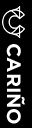
<style>
.page{position:relative;width:32px;height:128px;background:#000000}
.page>*{position:absolute;margin:0}
.t1{font:33.3px "Gotham-Bold";color:#ffffff}
</style>
<div class="page">
<p class="t1" style="left:6px;top:44px;width:19px;height:80px;rotate:90deg">CARIÑO</p>
</div>
